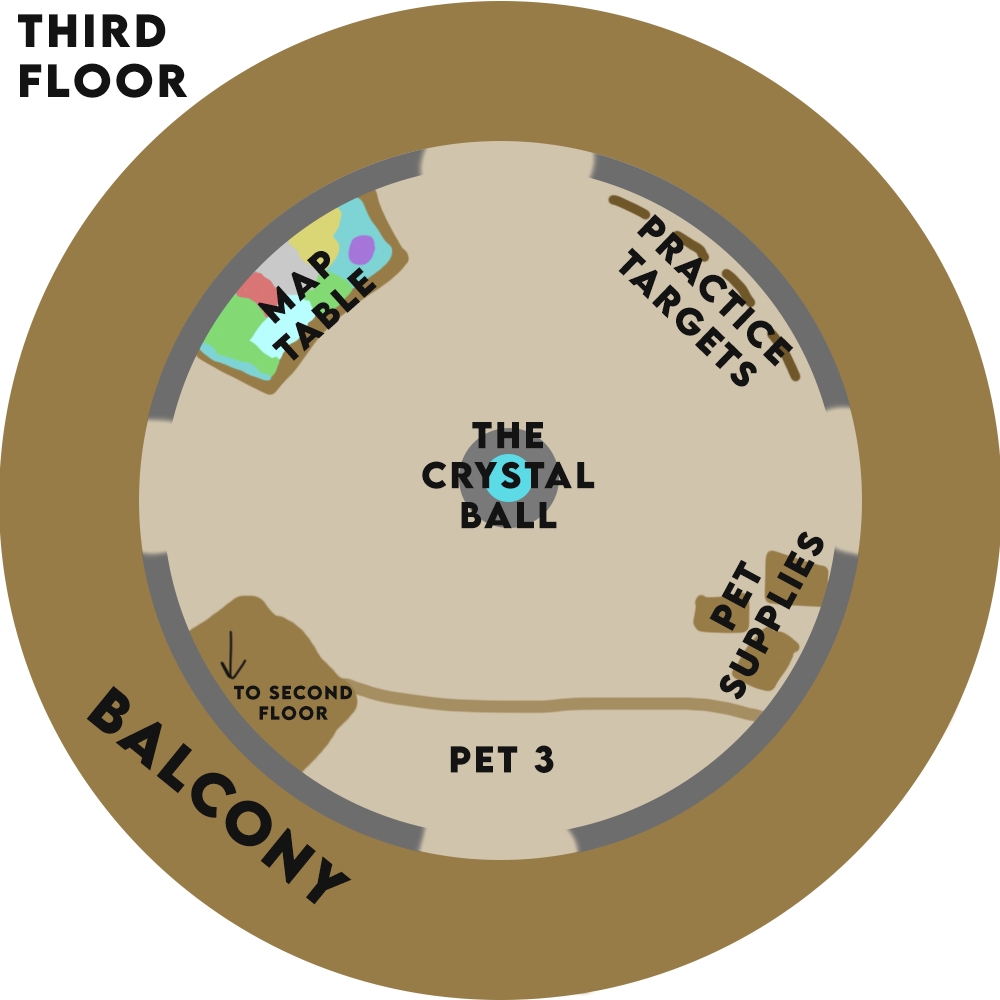
<style>
.page{position:relative;width:1000px;height:1000px;background:#977c48}
.page>*{position:absolute;margin:0}
.t1{font:41.7px "LEMONMILK-Bold";letter-spacing:0.075em;color:#131313}
.t2{font:33.3px "LEMONMILK-Bold";letter-spacing:0.075em;color:#131313}
.t3{font:54px "LEMONMILK-Bold";letter-spacing:0.075em;color:#131313}
.t4{font:17.1px "LEMONMILK-Bold";letter-spacing:0.075em;color:#131313}
</style>
<div class="page">
<p class="t1" style="left:18px;top:14px;width:170px;height:84px">third<br>floor</p>
<p class="t2" style="left:618px;top:214px;width:176px;height:173px;text-align:center;rotate:44deg">practice<br>targets</p>
<p class="t2" style="left:257px;top:251px;width:120px;height:110px;text-align:center;rotate:-42deg">map<br>table</p>
<p class="t2" style="left:422px;top:422px;width:173px;height:107px;text-align:center">the<br>crystal<br>ball</p>
<p class="t2" style="left:709px;top:531px;width:115px;height:169px;text-align:center;rotate:-62deg">pet<br>supplies</p>
<p class="t3" style="left:86px;top:686px;width:266px;height:219px;rotate:39deg">balcony</p>
<p class="t4" style="left:234px;top:685px;width:118px;height:36px;text-align:center">to second floor</p>
<p class="t2" style="left:450px;top:745px;width:104px;height:28px">pet 3</p>
</div>
